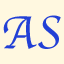
<style>
.page{position:relative;width:64px;height:64px;background:#fff8e0}
.page>*{position:absolute;margin:0}
.t1{font:48px "Apple-Chancery";color:#2240d6}
</style>
<div class="page">
<p class="t1" style="left:3px;top:15px;width:58px;height:34px">AS</p>
</div>
